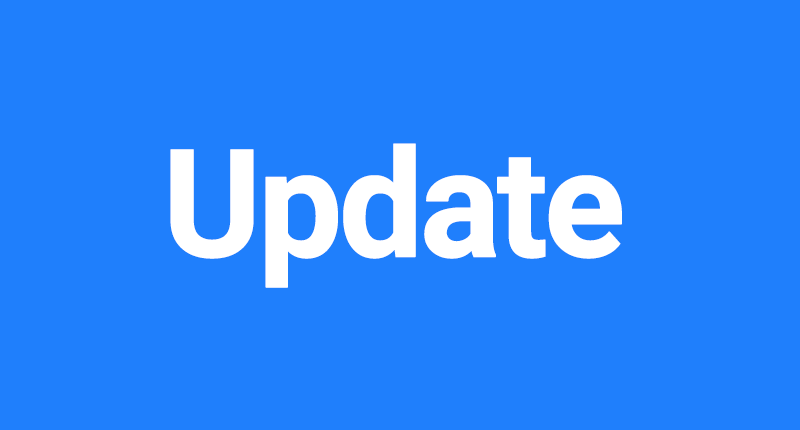
<style>
.page{position:relative;width:800px;height:430px;background:#1f7ffc}
.page>*{position:absolute;margin:0}
.t1{font:150px "Roboto-Bold";letter-spacing:-0.05em;color:#ffffff;font-weight:bold}
</style>
<div class="page">
<p class="t1" style="left:170px;top:143px;width:452px;height:145px">Update</p>
</div>
